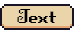
<style>
.page{position:relative;width:74px;height:32px;background:#ead4aa}
.page>*{position:absolute;margin:0}
.t1{font:24px "DungeonFont";color:#000000}
</style>
<div class="page">
<p class="t1" style="left:17px;top:9px;width:39px;height:14px">Text</p>
</div>
